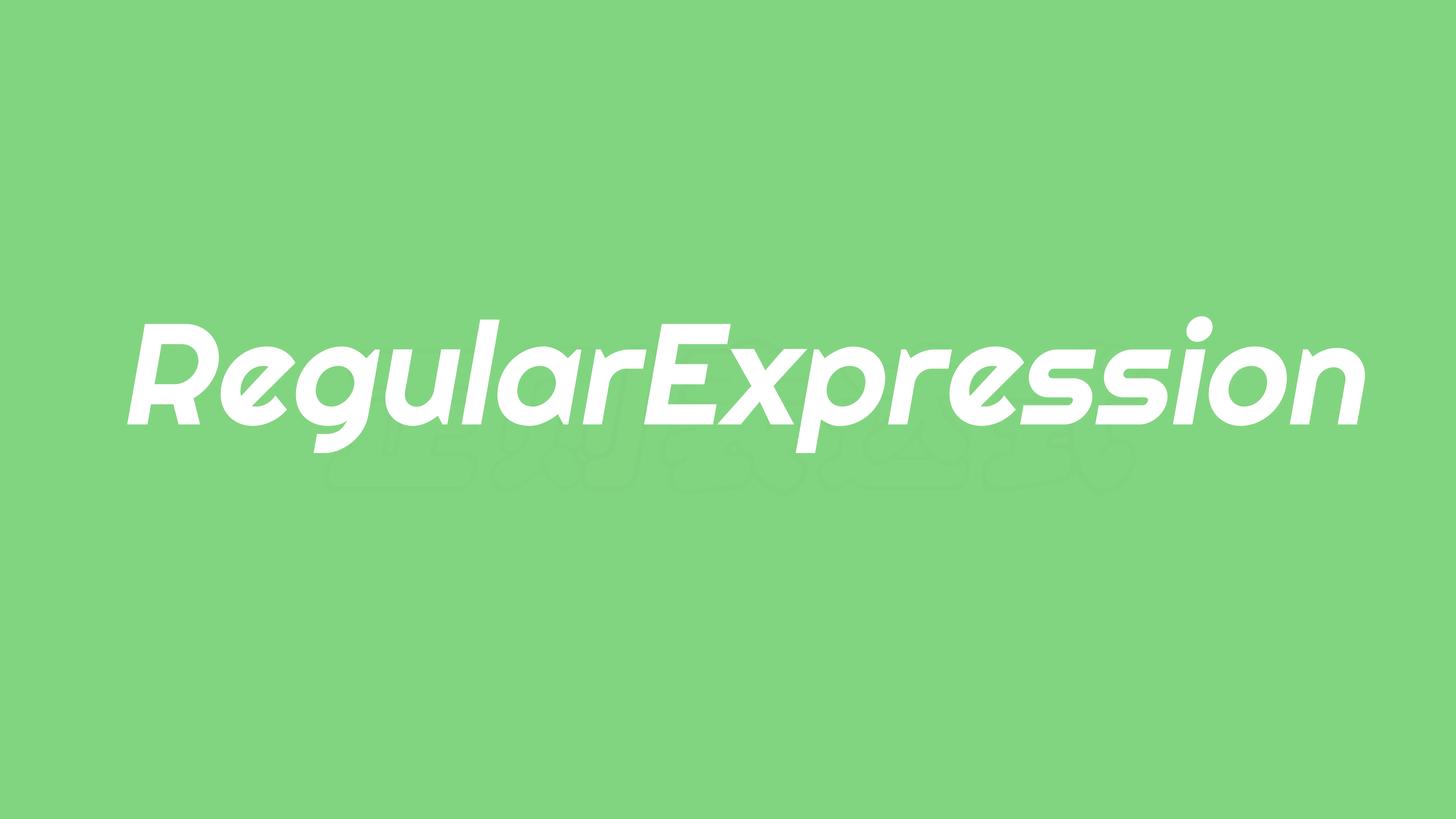
<style>
.page{position:relative;width:1456px;height:819px;background:#82d580}
.page>*{position:absolute;margin:0}
.t1{font:143.4px "Righteous-Regular";color:#ffffff;font-style:italic}
</style>
<div class="page">
<p class="t1" style="left:127px;top:316px;width:1238px;height:137px">RegularExpression</p>
</div>
